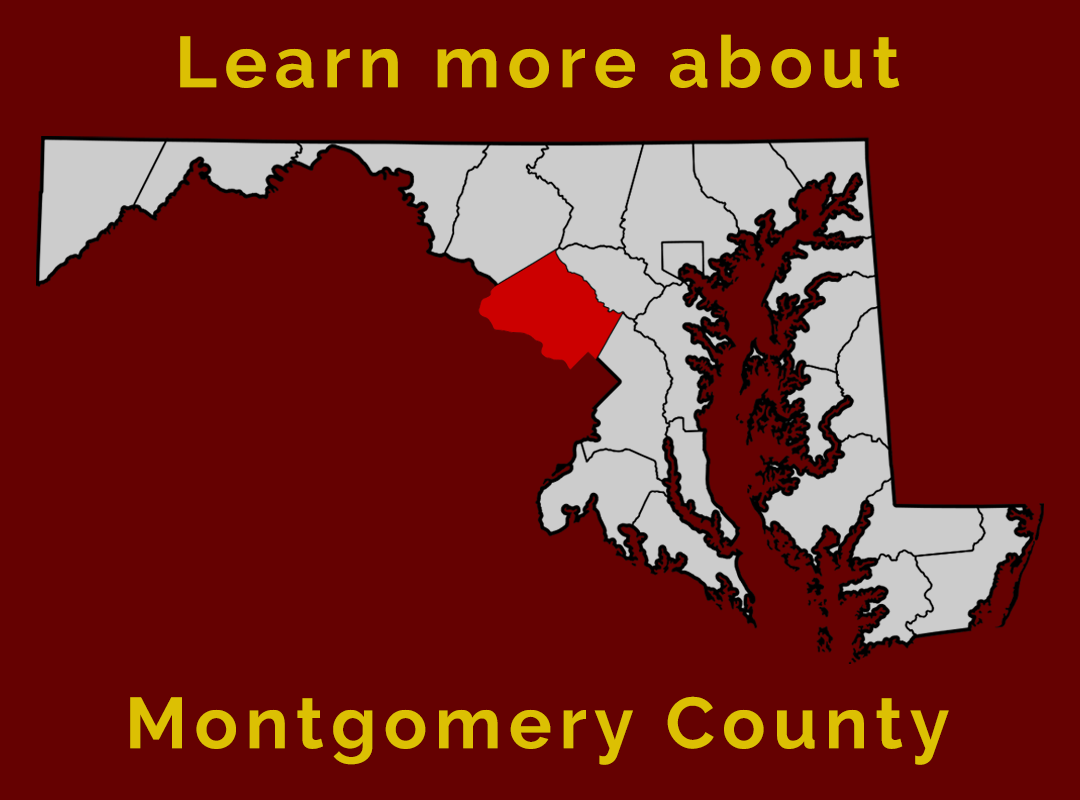
<style>
.page{position:relative;width:1080px;height:800px;background:#650101}
.page>*{position:absolute;margin:0}
.t1{font:72px "Raleway-Bold";letter-spacing:0.1em;color:#dcc003}
</style>
<div class="page">
<p class="t1" style="left:180px;top:34px;width:720px;height:54px">Learn more about</p>
<p class="t1" style="left:130px;top:696px;width:819px;height:69px">Montgomery County</p>
</div>
